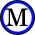
<style>
.page{position:relative;width:35px;height:35px;background:#ffffff}
.page>*{position:absolute;margin:0}
.t1{font:24px "Century";color:#000000}
</style>
<div class="page">
<p class="t1" style="left:6px;top:8px;width:22px;height:18px">M</p>
</div>
